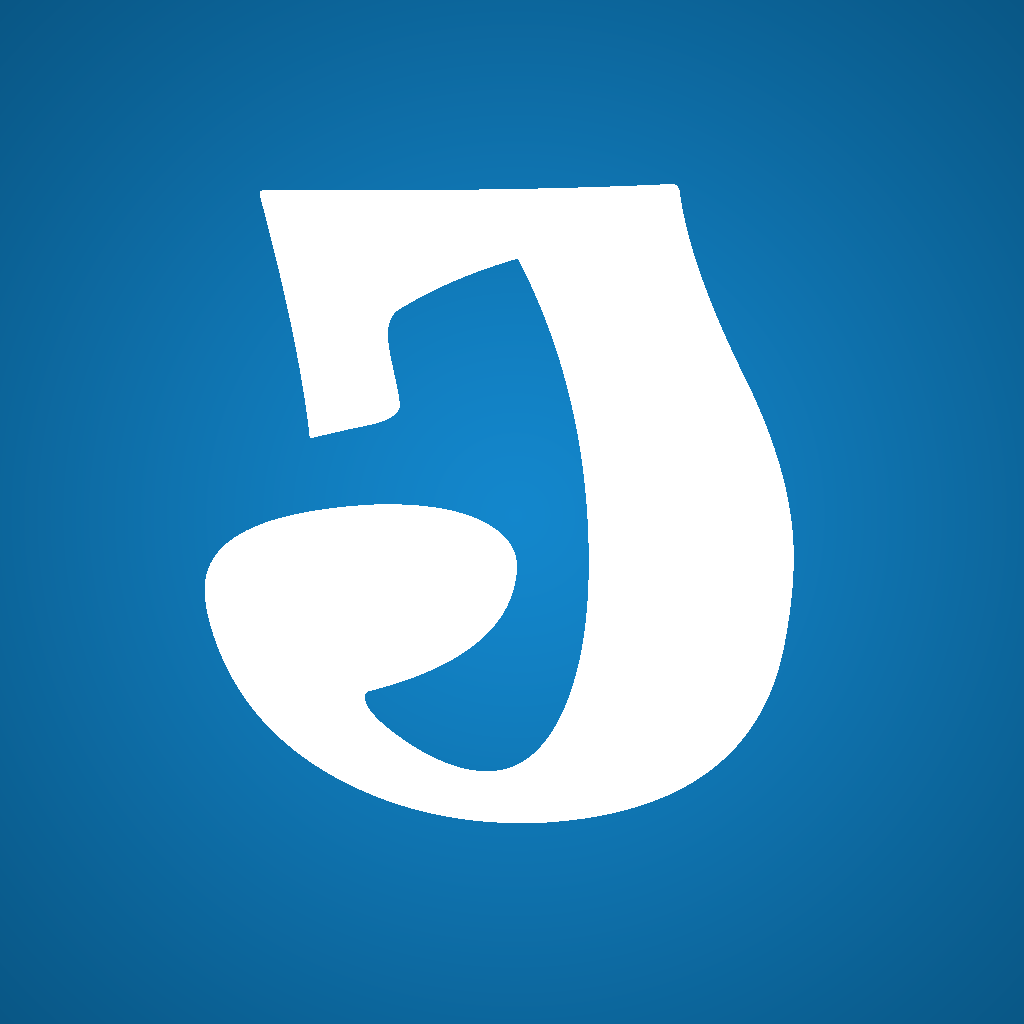
<style>
.page{position:relative;width:1024px;height:1024px;background:#ffffff}
.page>*{position:absolute;margin:0}
.t1{font:800px "Ravie";color:#ffffff}
</style>
<div class="page">
<p class="t1" style="left:205px;top:184px;width:589px;height:639px">J</p>
</div>
